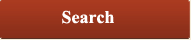
<style>
.page{position:relative;width:191px;height:40px}
.page>*{position:absolute;margin:0}
.t1{font:18px "TimesNewRomanPS-BoldMT";color:#ffffff}
</style>
<div class="page">
<p class="t1" style="left:62px;top:10px;width:52px;height:14px">Search</p>
</div>
